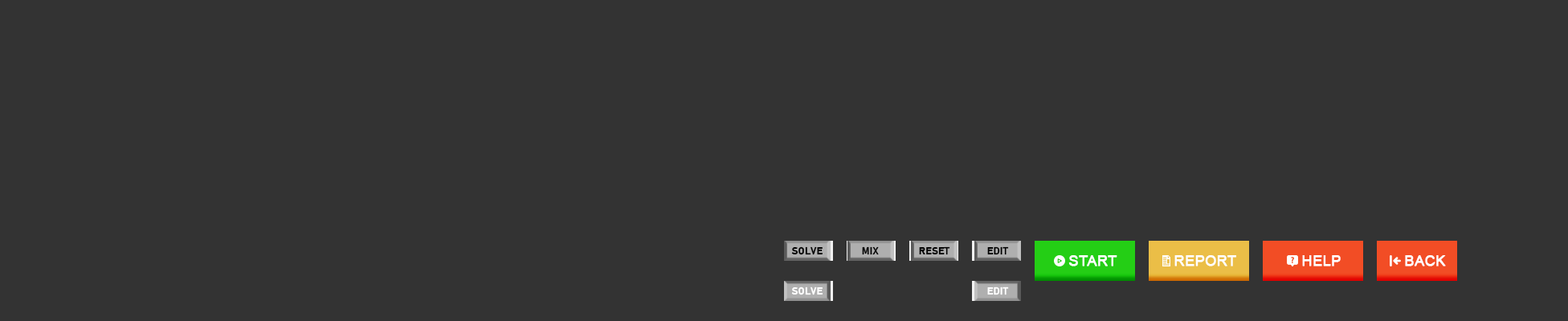
<style>
.page{position:relative;width:1568px;height:321px;background:#333333}
.page>*{position:absolute;margin:0}
.t1{font:10px "Bahnschrift-Bold";letter-spacing:0.025em;color:#000000;font-weight:bold}
.t2{font:14.1px "ArialMT";letter-spacing:0.025em;color:#ffffff;font-weight:bold}
.t3{font:10px "Bahnschrift-Bold";letter-spacing:0.025em;color:#ffffff;font-weight:bold}
</style>
<div class="page">
<p class="t1" style="left:791px;top:247px;width:32px;height:8px">SOLVE</p>
<p class="t1" style="left:862px;top:247px;width:17px;height:8px">MIX</p>
<p class="t1" style="left:919px;top:247px;width:31px;height:8px">RESET</p>
<p class="t1" style="left:987px;top:247px;width:22px;height:8px">EDIT</p>
<p class="t2" style="left:1068px;top:255px;width:49px;height:12px">START</p>
<p class="t2" style="left:1174px;top:255px;width:62px;height:12px">REPORT</p>
<p class="t2" style="left:1302px;top:255px;width:39px;height:12px">HELP</p>
<p class="t2" style="left:1405px;top:255px;width:41px;height:12px">BACK</p>
<p class="t3" style="left:791px;top:287px;width:32px;height:9px">SOLVE</p>
<p class="t3" style="left:987px;top:287px;width:22px;height:9px">EDIT</p>
</div>
